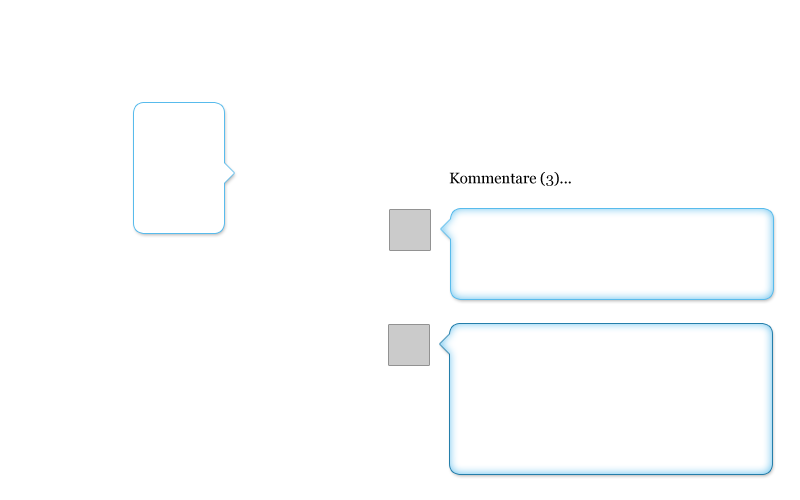
<style>
.page{position:relative;width:800px;height:500px;background:#ffffff}
.page>*{position:absolute;margin:0}
.t1{font:15px "Georgia";color:#000000}
</style>
<div class="page">
<p class="t1" style="left:449px;top:172px;width:122px;height:14px">Kommentare (3)...</p>
</div>
